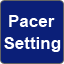
<style>
.page{position:relative;width:64px;height:64px;background:#0b1f78}
.page>*{position:absolute;margin:0}
.t1{font:17px "Arial-BoldMT";color:#ffffff}
</style>
<div class="page">
<p class="t1" style="left:9px;top:15px;width:46px;height:12px">Pacer</p>
<p class="t1" style="left:4px;top:37px;width:57px;height:15px">Setting</p>
</div>
